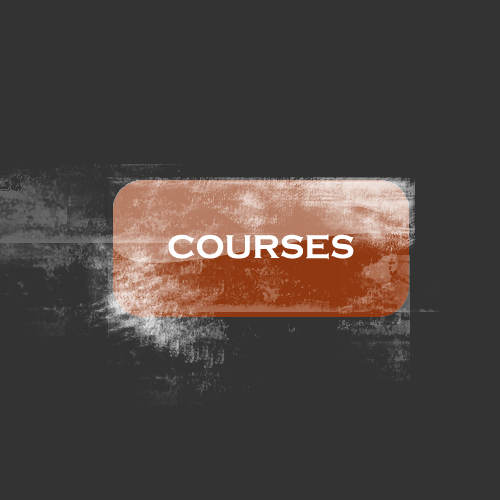
<style>
.page{position:relative;width:500px;height:500px;background:#333333}
.page>*{position:absolute;margin:0}
.t1{font:34px "CopperplateGothic-Bold";color:#ffffff}
</style>
<div class="page">
<p class="t1" style="left:168px;top:234px;width:186px;height:26px">COURSES</p>
</div>
